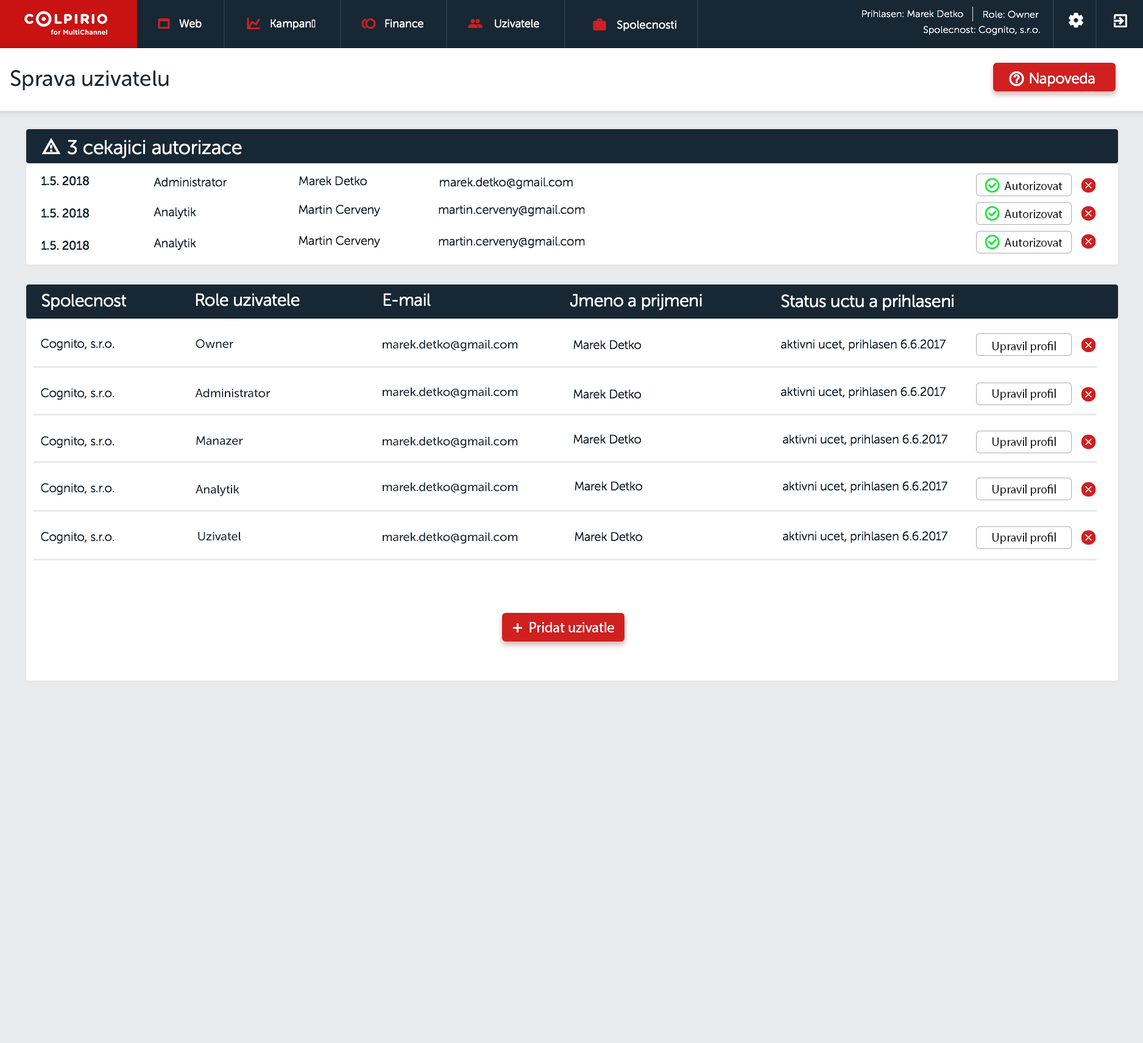
<style>
.page{position:relative;width:1143px;height:1043px;background:#ffffff}
.page>*{position:absolute;margin:0}
.t1{font:9.7px "MuseoSansRounded-100";letter-spacing:0.025em;color:#ffffff}
.t2{font:11px "MuseoSansRounded-300";letter-spacing:0.025em;color:#ffffff}
.t3{font:21.9px "MuseoSansRounded-500";color:#172734}
.t4{font:14.6px "MuseoSansRounded-300";color:#ffffff}
.t5{font:19.5px "MuseoSansRounded-300";color:#ffffff}
.t6{font:12.2px "MuseoSansRounded-500";color:#172734}
.t7{font:12.2px "MuseoSansRounded-300";color:#172734}
.t8{font:12.2px "MyriadPro-Regular";color:#000000}
.t9{font:17.1px "MuseoSansRounded-300";color:#ffffff}
.t10{font:14.6px "MyriadPro-Regular";color:#ffffff}
</style>
<div class="page">
<p class="t1" style="left:862px;top:10px;width:101px;height:8px">Prihlasen: Marek Detko</p>
<p class="t1" style="left:983px;top:10px;width:56px;height:8px">Role: Owner</p>
<p class="t2" style="left:179px;top:19px;width:23px;height:9px">Web</p>
<p class="t2" style="left:271px;top:19px;width:45px;height:11px">Kampaně</p>
<p class="t2" style="left:385px;top:19px;width:38px;height:9px">Finance</p>
<p class="t2" style="left:495px;top:19px;width:44px;height:9px">Uzivatele</p>
<p class="t2" style="left:617px;top:20px;width:59px;height:11px">Spolecnosti</p>
<p class="t1" style="left:924px;top:26px;width:116px;height:9px">Spolecnost: Cognito, s.r.o.</p>
<p class="t3" style="left:10px;top:70px;width:159px;height:21px">Sprava uzivatelu</p>
<p class="t4" style="left:1030px;top:73px;width:65px;height:14px">Napoveda</p>
<p class="t5" style="left:68px;top:140px;width:174px;height:18px">3 cekajici autorizace</p>
<p class="t6" style="left:41px;top:176px;width:49px;height:10px">1.5. 2018</p>
<p class="t7" style="left:154px;top:177px;width:73px;height:10px">Administrator</p>
<p class="t7" style="left:299px;top:176px;width:68px;height:10px">Marek Detko</p>
<p class="t7" style="left:439px;top:177px;width:134px;height:12px">marek.detko@gmail.com</p>
<p class="t8" style="left:1004px;top:182px;width:59px;height:8px">Autorizovat</p>
<p class="t6" style="left:41px;top:208px;width:49px;height:10px">1.5. 2018</p>
<p class="t7" style="left:154px;top:207px;width:42px;height:12px">Analytik</p>
<p class="t7" style="left:299px;top:205px;width:81px;height:12px">Martin Cerveny</p>
<p class="t7" style="left:439px;top:205px;width:146px;height:12px">martin.cerveny@gmail.com</p>
<p class="t8" style="left:1004px;top:210px;width:59px;height:8px">Autorizovat</p>
<p class="t6" style="left:41px;top:241px;width:49px;height:9px">1.5. 2018</p>
<p class="t7" style="left:154px;top:238px;width:42px;height:12px">Analytik</p>
<p class="t7" style="left:299px;top:236px;width:81px;height:12px">Martin Cerveny</p>
<p class="t7" style="left:439px;top:236px;width:146px;height:13px">martin.cerveny@gmail.com</p>
<p class="t8" style="left:1004px;top:238px;width:59px;height:9px">Autorizovat</p>
<p class="t9" style="left:42px;top:294px;width:85px;height:16px">Spolecnost</p>
<p class="t9" style="left:196px;top:293px;width:104px;height:13px">Role uzivatele</p>
<p class="t9" style="left:383px;top:293px;width:48px;height:13px">E-mail</p>
<p class="t9" style="left:570px;top:294px;width:132px;height:16px">Jmeno a prijmeni</p>
<p class="t9" style="left:781px;top:294px;width:173px;height:17px">Status uctu a prihlaseni</p>
<p class="t7" style="left:41px;top:339px;width:74px;height:12px">Cognito, s.r.o.</p>
<p class="t6" style="left:196px;top:339px;width:37px;height:10px">Owner</p>
<p class="t6" style="left:383px;top:340px;width:135px;height:12px">marek.detko@gmail.com</p>
<p class="t7" style="left:573px;top:340px;width:69px;height:10px">Marek Detko</p>
<p class="t7" style="left:781px;top:339px;width:165px;height:12px">aktivni ucet, prihlasen 6.6.2017</p>
<p class="t8" style="left:993px;top:341px;width:63px;height:12px">Upravil profil</p>
<p class="t7" style="left:41px;top:388px;width:74px;height:12px">Cognito, s.r.o.</p>
<p class="t6" style="left:195px;top:389px;width:76px;height:9px">Administrator</p>
<p class="t6" style="left:383px;top:388px;width:135px;height:11px">marek.detko@gmail.com</p>
<p class="t7" style="left:573px;top:389px;width:69px;height:10px">Marek Detko</p>
<p class="t7" style="left:781px;top:387px;width:165px;height:11px">aktivni ucet, prihlasen 6.6.2017</p>
<p class="t8" style="left:993px;top:389px;width:63px;height:11px">Upravil profil</p>
<p class="t7" style="left:41px;top:436px;width:74px;height:12px">Cognito, s.r.o.</p>
<p class="t6" style="left:196px;top:436px;width:47px;height:9px">Manazer</p>
<p class="t6" style="left:383px;top:437px;width:135px;height:11px">marek.detko@gmail.com</p>
<p class="t7" style="left:573px;top:434px;width:69px;height:10px">Marek Detko</p>
<p class="t7" style="left:782px;top:434px;width:165px;height:12px">aktivni ucet, prihlasen 6.6.2017</p>
<p class="t8" style="left:993px;top:437px;width:63px;height:11px">Upravil profil</p>
<p class="t7" style="left:41px;top:483px;width:74px;height:12px">Cognito, s.r.o.</p>
<p class="t6" style="left:196px;top:485px;width:43px;height:12px">Analytik</p>
<p class="t6" style="left:383px;top:483px;width:135px;height:11px">marek.detko@gmail.com</p>
<p class="t7" style="left:575px;top:481px;width:68px;height:10px">Marek Detko</p>
<p class="t7" style="left:782px;top:481px;width:165px;height:12px">aktivni ucet, prihlasen 6.6.2017</p>
<p class="t8" style="left:993px;top:484px;width:63px;height:12px">Upravil profil</p>
<p class="t7" style="left:41px;top:532px;width:74px;height:12px">Cognito, s.r.o.</p>
<p class="t6" style="left:198px;top:532px;width:43px;height:9px">Uzivatel</p>
<p class="t6" style="left:383px;top:533px;width:135px;height:11px">marek.detko@gmail.com</p>
<p class="t7" style="left:575px;top:532px;width:68px;height:10px">Marek Detko</p>
<p class="t7" style="left:782px;top:531px;width:165px;height:12px">aktivni ucet, prihlasen 6.6.2017</p>
<p class="t8" style="left:993px;top:533px;width:63px;height:11px">Upravil profil</p>
<p class="t10" style="left:530px;top:622px;width:84px;height:10px">Pridat uzivatle</p>
</div>
